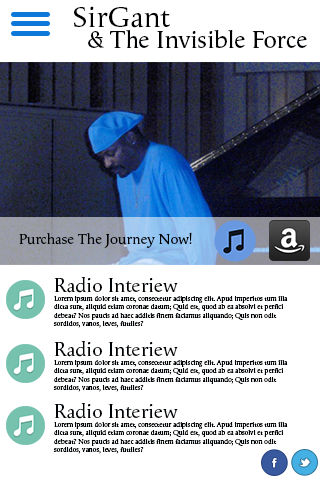
<style>
.page{position:relative;width:320px;height:480px;background:#ffffff}
.page>*{position:absolute;margin:0}
.t1{font:30px "Apolline-Regular";color:#020002}
.t2{font:25px "Apolline-Regular";color:#000204}
.t3{font:15px "Apolline-Regular";color:#000204}
.t4{font:7px "Apolline-Regular";color:#000306}
.t5{font:20px "Apolline-Regular";color:#000306}
</style>
<div class="page">
<p class="t1" style="left:74px;top:6px;width:97px;height:22px">SirGant</p>
<p class="t2" style="left:88px;top:30px;width:219px;height:18px">&amp; The Invisible Force</p>
<p class="t3" style="left:19px;top:232px;width:173px;height:16px">Purchase The Journey Now!</p>
<p class="t4" style="left:53px;top:277px;width:235px;height:51px"><span class="t5">Radio Interiew<br></span>Lorem ipsum dolor sit amet, consectetur adipiscing elit. Apud imperitos tum illa dicta sunt, aliquid etiam coronae datum; Quid est, quod ab ea absolvi et perfici debeat? Nos paucis ad haec additis finem faciamus aliquando; Quis non odit sordidos, vanos, leves, futtiles?</p>
<p class="t4" style="left:53px;top:341px;width:235px;height:51px"><span class="t5">Radio Interiew<br></span>Lorem ipsum dolor sit amet, consectetur adipiscing elit. Apud imperitos tum illa dicta sunt, aliquid etiam coronae datum; Quid est, quod ab ea absolvi et perfici debeat? Nos paucis ad haec additis finem faciamus aliquando; Quis non odit sordidos, vanos, leves, futtiles?</p>
<p class="t4" style="left:53px;top:403px;width:235px;height:51px"><span class="t5">Radio Interiew<br></span>Lorem ipsum dolor sit amet, consectetur adipiscing elit. Apud imperitos tum illa dicta sunt, aliquid etiam coronae datum; Quid est, quod ab ea absolvi et perfici debeat? Nos paucis ad haec additis finem faciamus aliquando; Quis non odit sordidos, vanos, leves, futtiles?</p>
</div>
